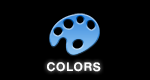
<style>
.page{position:relative;width:150px;height:80px;background:#000000}
.page>*{position:absolute;margin:0}
.t1{font:12px "AlteHaasGrotesk_Bold";letter-spacing:0.05em;color:#ffffff}
</style>
<div class="page">
<p class="t1" style="left:47px;top:62px;width:54px;height:10px">COLORS</p>
</div>
